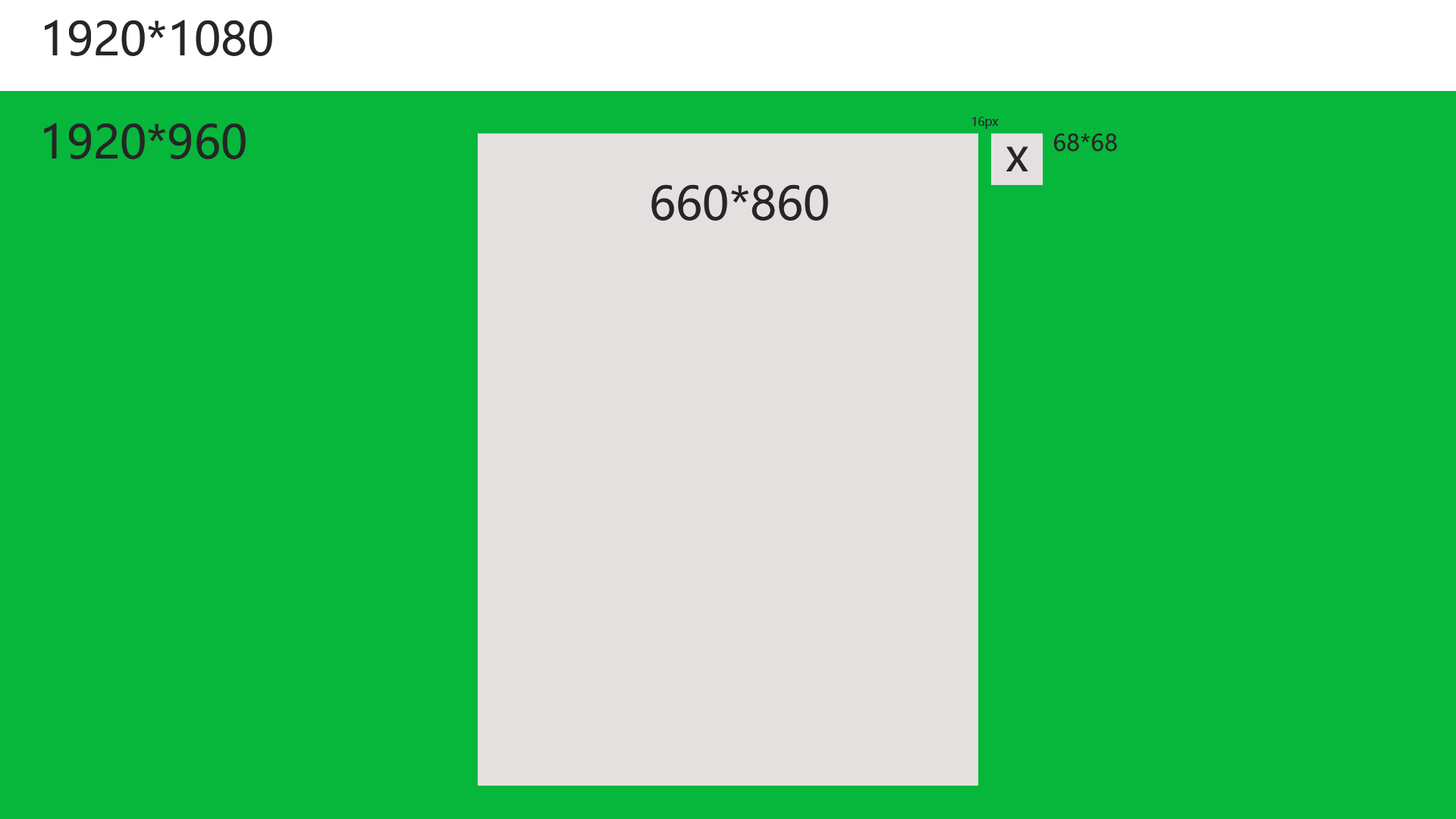
<style>
.page{position:relative;width:1456px;height:819px;background:#06b73c}
.page>*{position:absolute;margin:0}
.t1{font:45.5px "MicrosoftYaHei";color:#262626}
.t2{font:12.1px "MicrosoftYaHei";color:#262626}
.t3{font:22.7px "MicrosoftYaHei";color:#262626}
</style>
<div class="page">
<p class="t1" style="left:45px;top:20px;width:227px;height:36px">1920*1080</p>
<p class="t1" style="left:44px;top:123px;width:202px;height:36px">1920*960</p>
<p class="t2" style="left:972px;top:117px;width:27px;height:12px">16px</p>
<p class="t3" style="left:1054px;top:133px;width:63px;height:19px">68*68</p>
<p class="t1" style="left:1006px;top:146px;width:22px;height:25px">x</p>
<p class="t1" style="left:651px;top:184px;width:177px;height:37px">660*860</p>
</div>
